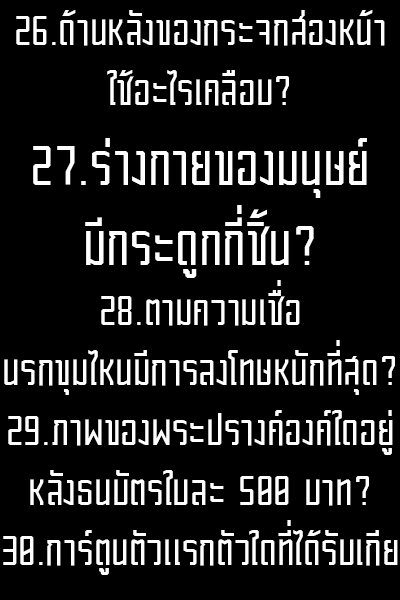
<style>
.page{position:relative;width:400px;height:600px;background:#000000}
.page>*{position:absolute;margin:0}
.t1{font:50px "Block-Regular";color:#ffffff}
.t2{font:66.7px "Block-Regular";color:#ffffff}
</style>
<div class="page">
<p class="t1" style="left:3px;top:10px;width:395px;height:565px;text-align:center">26.ด้านหลังของกระจกส่องหน้า<br>ใช้อะไรเคลือบ?<br><span class="t2">27.ร่างกายของมนุษย์<br>มีกระดูกกี่ชิ้น?<br></span>28.ตามความเชื่อ นรกขุมไหนมีการลงโทษหนักที่สุด?<br>29.ภาพของพระปรางค์องค์ใดอยู่หลังธนบัตรใบละ 500 บาท?<br>30.การ์ตูนตัวแรกตัวใดที่ได้รับเกียรติพิมพ์บนแสตมป์ญี่ปุ่นคือ</p>
</div>
